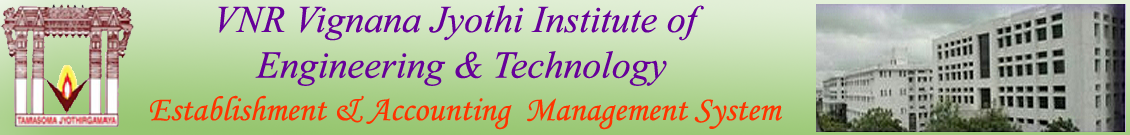
<style>
.page{position:relative;width:1130px;height:135px}
.page>*{position:absolute;margin:0}
.t1{font:38px "TimesNewRomanPS-ItalicMT";color:#660099}
.t2{font:35.3px "TimesNewRomanPS-ItalicMT";color:#660099}
.t3{font:35px "MonotypeCorsiva";color:#ff3300}
</style>
<div class="page">
<p class="t1" style="left:152px;top:0px;width:552px;height:89px"><span class="t2">       </span>VNR Vignana Jyothi Institute of<br>           Engineering &amp; Technology</p>
<p class="t3" style="left:140px;top:92px;width:642px;height:39px">Establishment &amp; Accounting  Management System</p>
</div>
